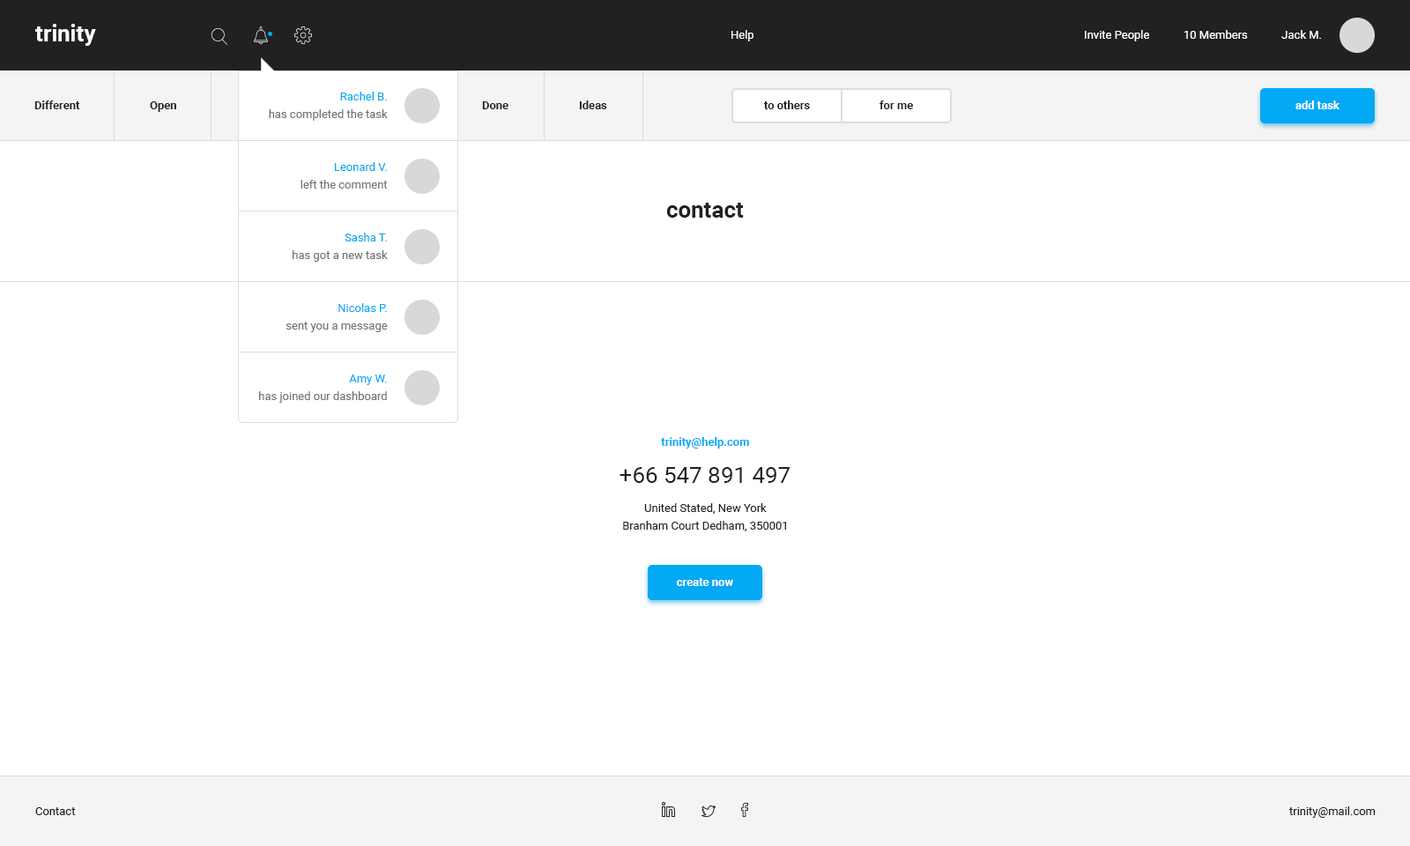
<style>
.page{position:relative;width:1410px;height:846px;background:#ffffff}
.page>*{position:absolute;margin:0}
.t1{font:22.9px "Roboto-Bold";color:#ffffff}
.t2{font:11.5px "Roboto-Regular";color:#ffffff}
.t3{font:11.5px "Roboto-Bold";color:#212121}
.t4{font:11.5px/17.6px "Roboto-Regular";color:#757575}
.t5{font:11.5px/17.6px "Roboto-Regular";color:#212121}
.t6{font:11.5px/17.6px "Roboto-Regular";color:#03a9f4}
.t7{font:11.5px "Roboto-Bold";color:#ffffff}
.t8{font:22.9px "Roboto-Bold";color:#212121}
.t9{font:11.5px "Roboto-Bold";color:#03a9f4}
.t10{font:22.9px "Roboto-Regular";color:#212121}
.t11{font:11.5px "Roboto-Regular";color:#212121}
</style>
<div class="page">
<p class="t1" style="left:35px;top:24px;width:61px;height:22px">trinity</p>
<p class="t2" style="left:731px;top:30px;width:22px;height:11px">Help</p>
<p class="t2" style="left:1085px;top:30px;width:236px;height:11px">Invite People            10 Members            Jack M.</p>
<p class="t3" style="left:34px;top:100px;width:46px;height:9px">Different</p>
<p class="t3" style="left:150px;top:101px;width:26px;height:11px">Open</p>
<p class="t4" style="left:269px;top:92px;width:119px;height:29px;text-align:right"><span class="t5"> </span><span class="t6">Rachel B. <br></span>has completed the task</p>
<p class="t3" style="left:482px;top:101px;width:26px;height:8px">Done</p>
<p class="t3" style="left:579px;top:100px;width:28px;height:9px">Ideas</p>
<p class="t3" style="left:763px;top:100px;width:47px;height:9px">to others</p>
<p class="t3" style="left:879px;top:100px;width:34px;height:9px">for me</p>
<p class="t7" style="left:1295px;top:100px;width:44px;height:9px">add task</p>
<p class="t4" style="left:300px;top:162px;width:88px;height:27px;text-align:right"><span class="t5"> </span><span class="t6">Leonard V. <br></span>left the comment</p>
<p class="t8" style="left:666px;top:203px;width:78px;height:15px">contact</p>
<p class="t4" style="left:293px;top:233px;width:95px;height:29px;text-align:right"><span class="t5"> </span><span class="t6">Sasha T. <br></span>has got a new task</p>
<p class="t4" style="left:285px;top:303px;width:103px;height:29px;text-align:right"><span class="t5"> </span><span class="t6">Nicolas P. <br></span>sent you a message</p>
<p class="t4" style="left:259px;top:374px;width:128px;height:29px;text-align:right"><span class="t5"> </span><span class="t6">Amy W.  <br></span>has joined our dashboard</p>
<p class="t9" style="left:661px;top:437px;width:88px;height:11px">trinity@help.com</p>
<p class="t10" style="left:619px;top:467px;width:170px;height:16px">+66 547 891 497</p>
<p class="t5" style="left:623px;top:503px;width:163px;height:28px;text-align:center">United Stated, New York<br>Branham Court Dedham, 350001</p>
<p class="t7" style="left:677px;top:578px;width:56px;height:8px">create now</p>
<p class="t11" style="left:35px;top:807px;width:41px;height:8px">Contact</p>
<p class="t11" style="left:1288px;top:806px;width:87px;height:12px">trinity@mail.com</p>
</div>
